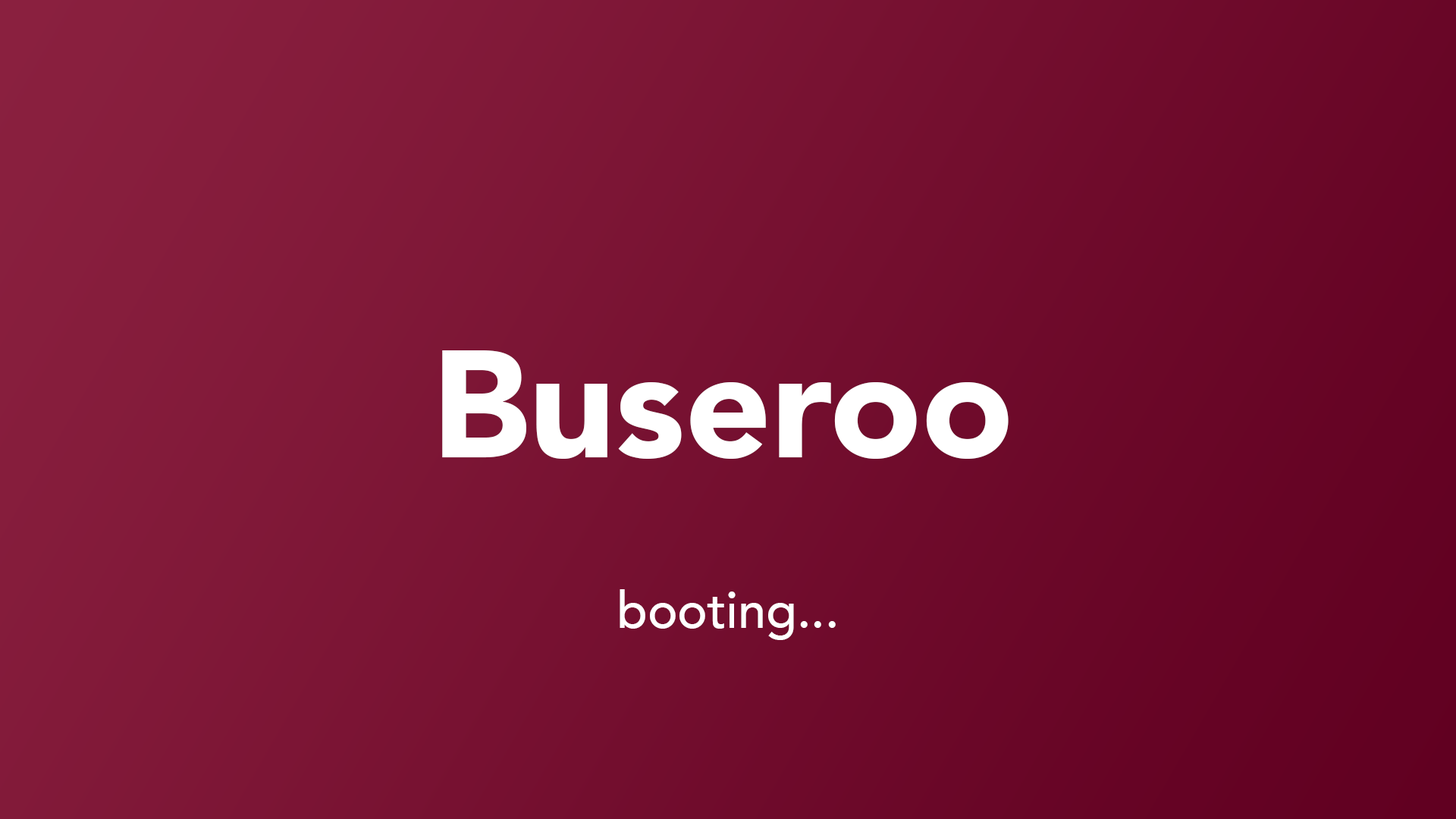
<style>
.page{position:relative;width:1456px;height:819px}
.page>*{position:absolute;margin:0}
.t1{font:150.5px "Avenir-Black";color:#ffffff}
.t2{font:50.4px "Avenir-Medium";color:#ffffff}
</style>
<div class="page">
<p class="t1" style="left:442px;top:350px;width:567px;height:109px">Buseroo</p>
<p class="t2" style="left:620px;top:589px;width:216px;height:51px">booting...</p>
</div>
